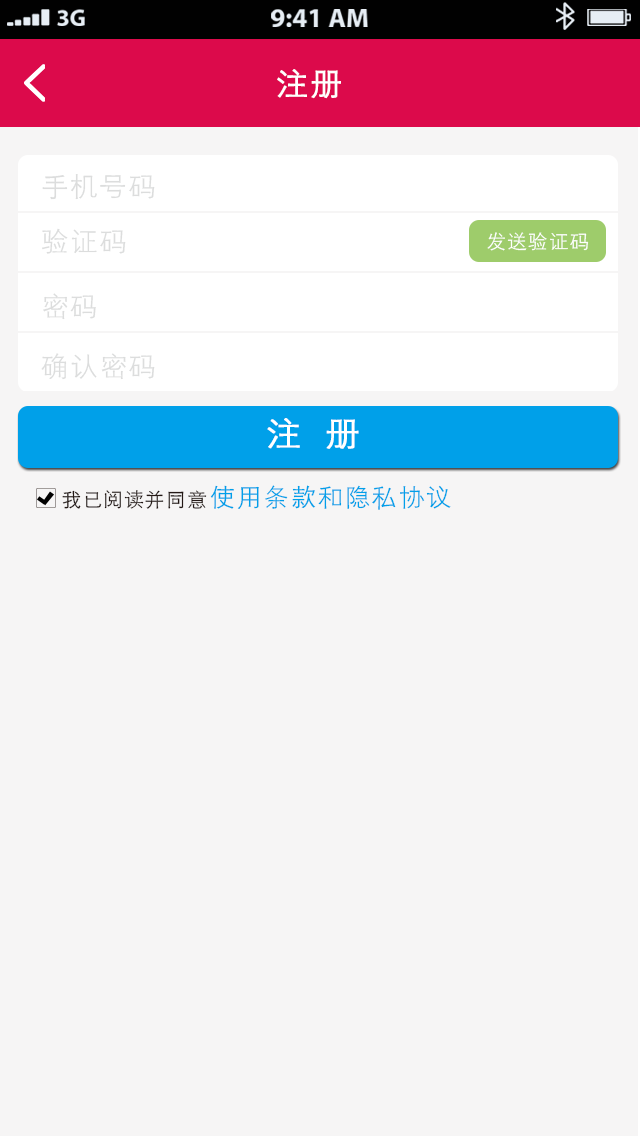
<style>
.page{position:relative;width:640px;height:1136px;background:#f6f5f5}
.page>*{position:absolute;margin:0}
.t1{font:33.3px "FZXH1JW--GB1-0";color:#ffffff;font-weight:bold}
.t2{font:29.2px "FZXH1JW--GB1-0";color:#dcdddd}
.t3{font:20.8px "FZXH1JW--GB1-0";color:#ffffff}
.t4{font:35.7px "FZXH1JW--GB1-0";color:#ffffff;font-weight:bold}
.t5{font:27.1px "FZXH1JW--GB1-0";color:#00a0e9}
.t6{font:20.8px "FZXH1JW--GB1-0";color:#231815}
</style>
<div class="page">
<p class="t1" style="left:277px;top:69px;width:64px;height:30px">注册</p>
<p class="t2" style="left:42px;top:174px;width:113px;height:26px">手机号码</p>
<p class="t2" style="left:42px;top:228px;width:84px;height:26px">验证码</p>
<p class="t3" style="left:487px;top:232px;width:102px;height:19px">发送验证码</p>
<p class="t2" style="left:43px;top:293px;width:53px;height:27px">密码</p>
<p class="t2" style="left:41px;top:353px;width:114px;height:27px">确认密码</p>
<p class="t4" style="left:267px;top:418px;width:92px;height:31px">注  册</p>
<p class="t5" style="left:210px;top:485px;width:241px;height:25px">使用条款和隐私协议</p>
<p class="t6" style="left:62px;top:490px;width:145px;height:19px">我已阅读并同意</p>
</div>
